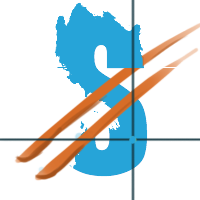
<style>
.page{position:relative;width:200px;height:200px;background:#ffffff}
.page>*{position:absolute;margin:0}
.t1{font:190px "Impact";color:#26a4d8}
</style>
<div class="page">
<p class="t1" style="left:57px;top:19px;width:91px;height:158px">S</p>
</div>
